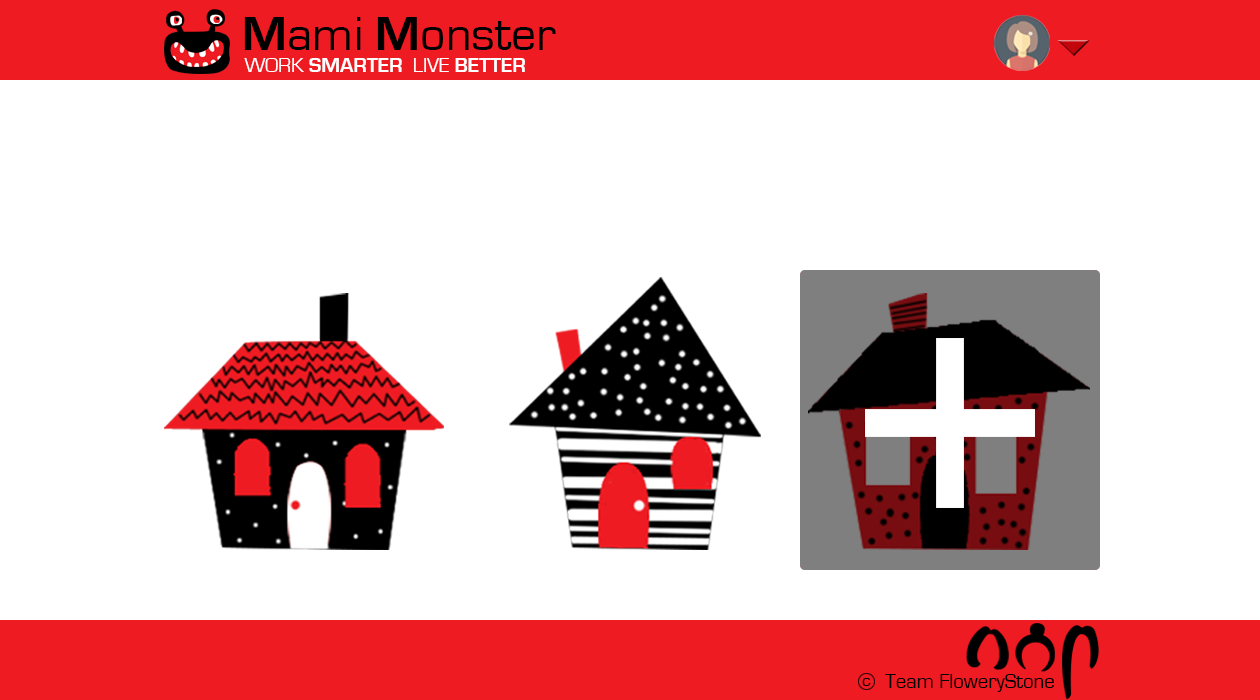
<style>
.page{position:relative;width:1260px;height:700px;background:#ffffff}
.page>*{position:absolute;margin:0}
.t1{font:50px "EurostileRegular";color:#000000}
.t2{font:50px "EurostileBold";color:#000000}
.t3{font:20.8px "EurostileBold";color:#ffffff}
.t4{font:20.8px "EurostileRegular";color:#ffffff}
.t5{font:17.7px "EurostileRegular";color:#000000}
.t6{font:20.8px "EurostileRegular";color:#000000}
</style>
<div class="page">
<p class="t1" style="left:244px;top:17px;width:312px;height:33px"><span class="t2">M</span>ami <span class="t2">M</span>onster</p>
<p class="t3" style="left:244px;top:58px;width:281px;height:14px"><span class="t4">WORK </span>SMARTER<span class="t4">  LIVE </span>BETTER</p>
<p class="t5" style="left:862px;top:678px;width:9px;height:8px">c</p>
<p class="t6" style="left:885px;top:674px;width:169px;height:18px">Team FloweryStone</p>
</div>
